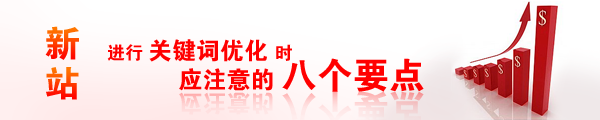
<style>
.page{position:relative;width:600px;height:120px;background:#ffffff}
.page>*{position:absolute;margin:0}
.t1{font:36px "FZDHTJW--GB1-0"}
.t2{font:24px "FZDHTJW--GB1-0";color:#ff0000}
.t3{font:18px "FZDHTJW--GB1-0";color:#ff0000}
.t4{font:36px "FZDHTJW--GB1-0";color:#ff0000}
</style>
<div class="page">
<p class="t1" style="left:45px;top:26px;width:34px;height:34px">新</p>
<p class="t2" style="left:107px;top:39px;width:185px;height:23px"><span class="t3">进行 </span>关键词优化 <span class="t3">时</span></p>
<p class="t2" style="left:179px;top:58px;width:245px;height:34px">应注意的 <span class="t4">八个要点</span></p>
<p class="t1" style="left:46px;top:67px;width:33px;height:33px">站</p>
</div>
